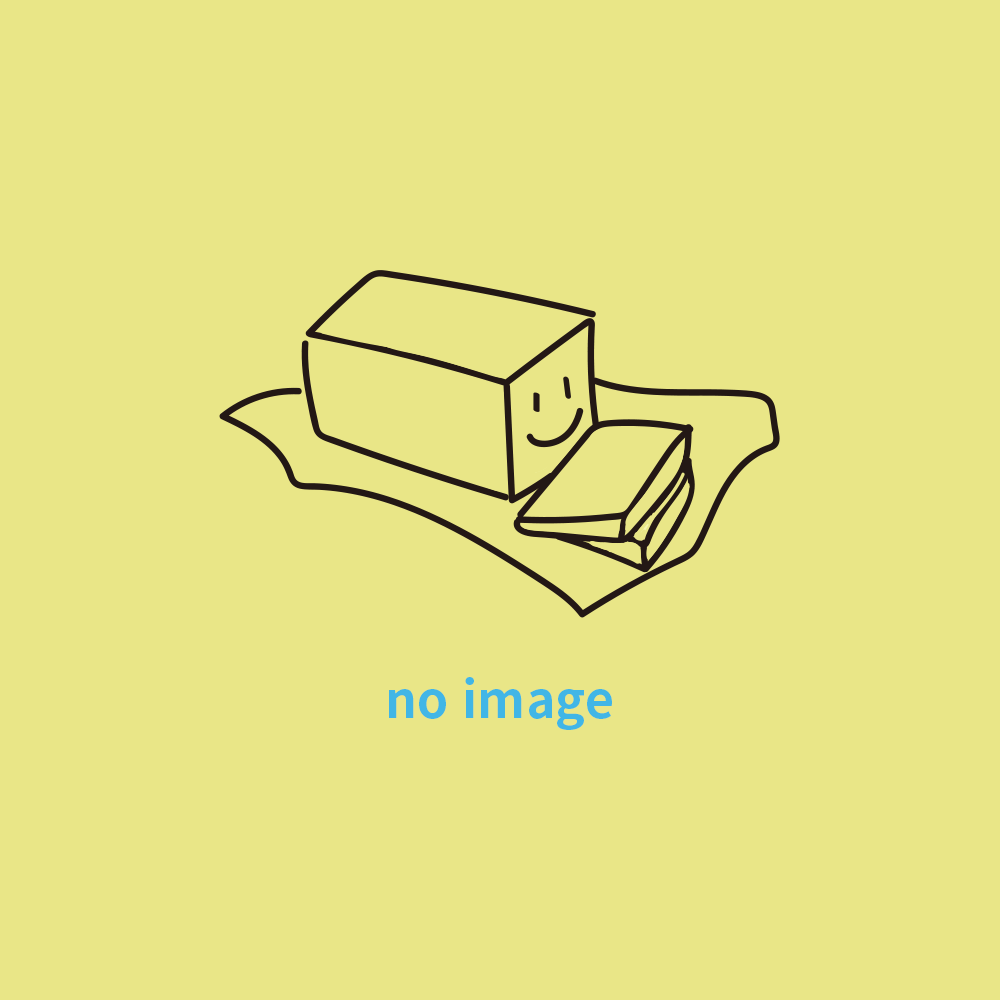
<style>
.page{position:relative;width:1000px;height:1000px;background:#e9e687}
.page>*{position:absolute;margin:0}
.t1{font:50px "NotoSansKR-Bold";color:#41b6e6}
</style>
<div class="page">
<p class="t1" style="left:389px;top:677px;width:223px;height:53px">no image</p>
</div>
